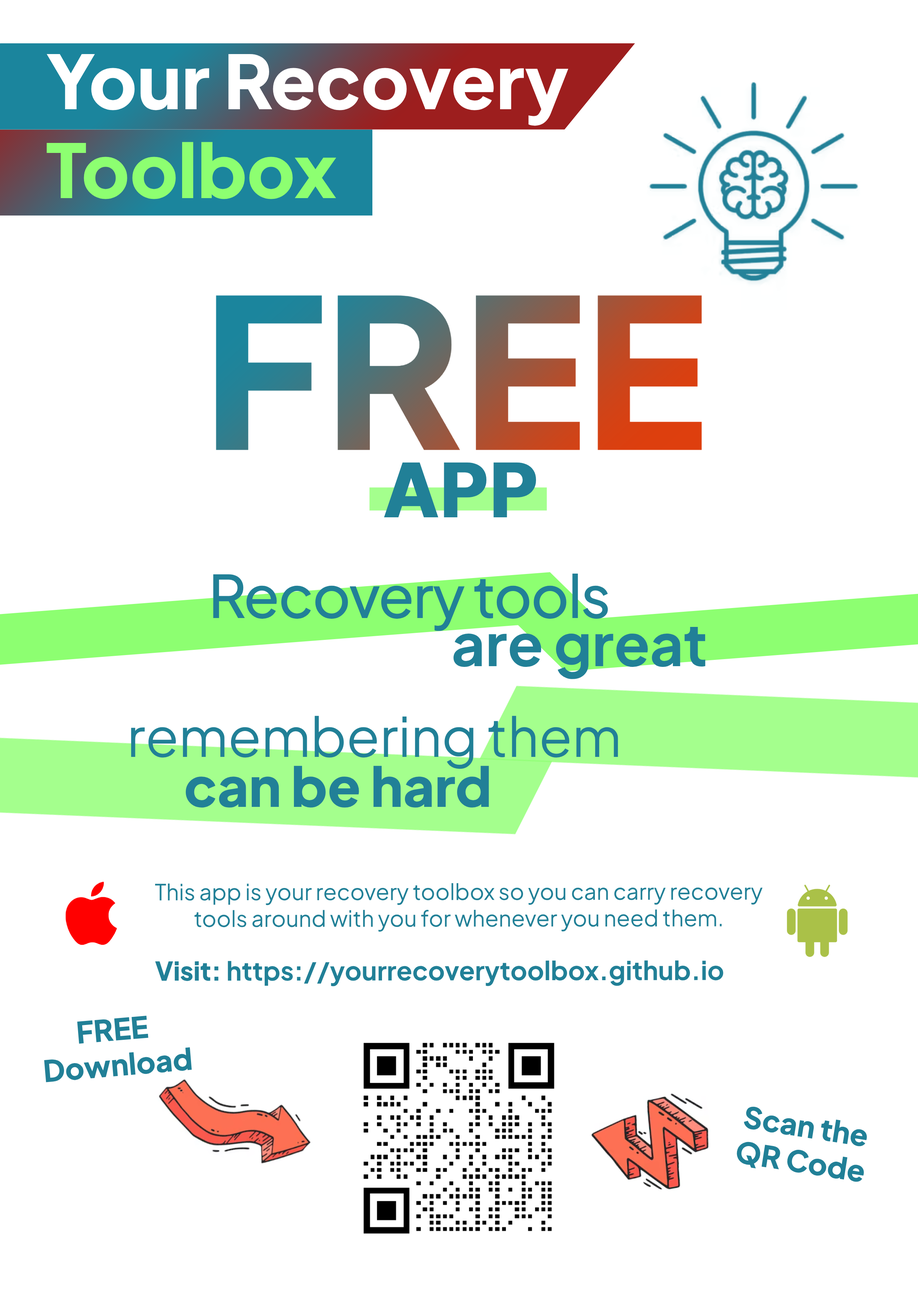
<style>
.page{position:relative;width:918px;height:1299px;background:#ffffff}
.page>*{position:absolute;margin:0}
.t1{font:74px "PlusJakartaSans-ExtraBold";color:#ffffff}
.t2{font:74px "PlusJakartaSans-ExtraBold";color:#8dff71}
.t3{font:73.6px "PlusJakartaSans-ExtraBold";color:#218097;font-weight:bold}
.t4{font:58.7px "PlusJakartaSans-Medium";letter-spacing:-0.021em;color:#218097}
.t5{font:58.7px "PlusJakartaSans-Bold";color:#218097}
.t6{font:54.2px "PlusJakartaSans-Regular";color:#218097}
.t7{font:54.2px "PlusJakartaSans-ExtraBold";color:#218097}
.t8{font:22.2px "PlusJakartaSans-Regular";color:#218097}
.t9{font:25.9px "PlusJakartaSans-Bold";color:#218097}
.t10{font:25.9px "PlusJakartaSans-ExtraBold";color:#218097}
.t11{font:29.6px "PlusJakartaSans-ExtraBold";color:#218097}
</style>
<div class="page">
<p class="t1" style="left:47px;top:54px;width:522px;height:145px">Your Recovery <span class="t2">Toolbox</span></p>
<p class="t3" style="left:384px;top:462px;width:152px;height:55px">APP</p>
<p class="t4" style="left:213px;top:573px;width:395px;height:58px">Recovery tools</p>
<p class="t5" style="left:454px;top:627px;width:252px;height:52px">are great</p>
<p class="t6" style="left:131px;top:716px;width:487px;height:53px">remembering them</p>
<p class="t7" style="left:185px;top:766px;width:304px;height:41px">can be hard</p>
<p class="t8" style="left:155px;top:883px;width:608px;height:48px;text-align:center">This app is your recovery toolbox so you can carry recovery tools around with you for whenever you need them.</p>
<p class="t9" style="left:155px;top:960px;width:568px;height:26px"><span class="t10">Visit: </span>https://yourrecoverytoolbox.github.io</p>
<p class="t11" style="left:44px;top:1016px;width:148px;height:66px;text-align:center;rotate:-5deg">FREE <br>Download</p>
<p class="t11" style="left:737px;top:1106px;width:130px;height:76px;text-align:center;rotate:9deg">Scan the<br>QR Code</p>
</div>
